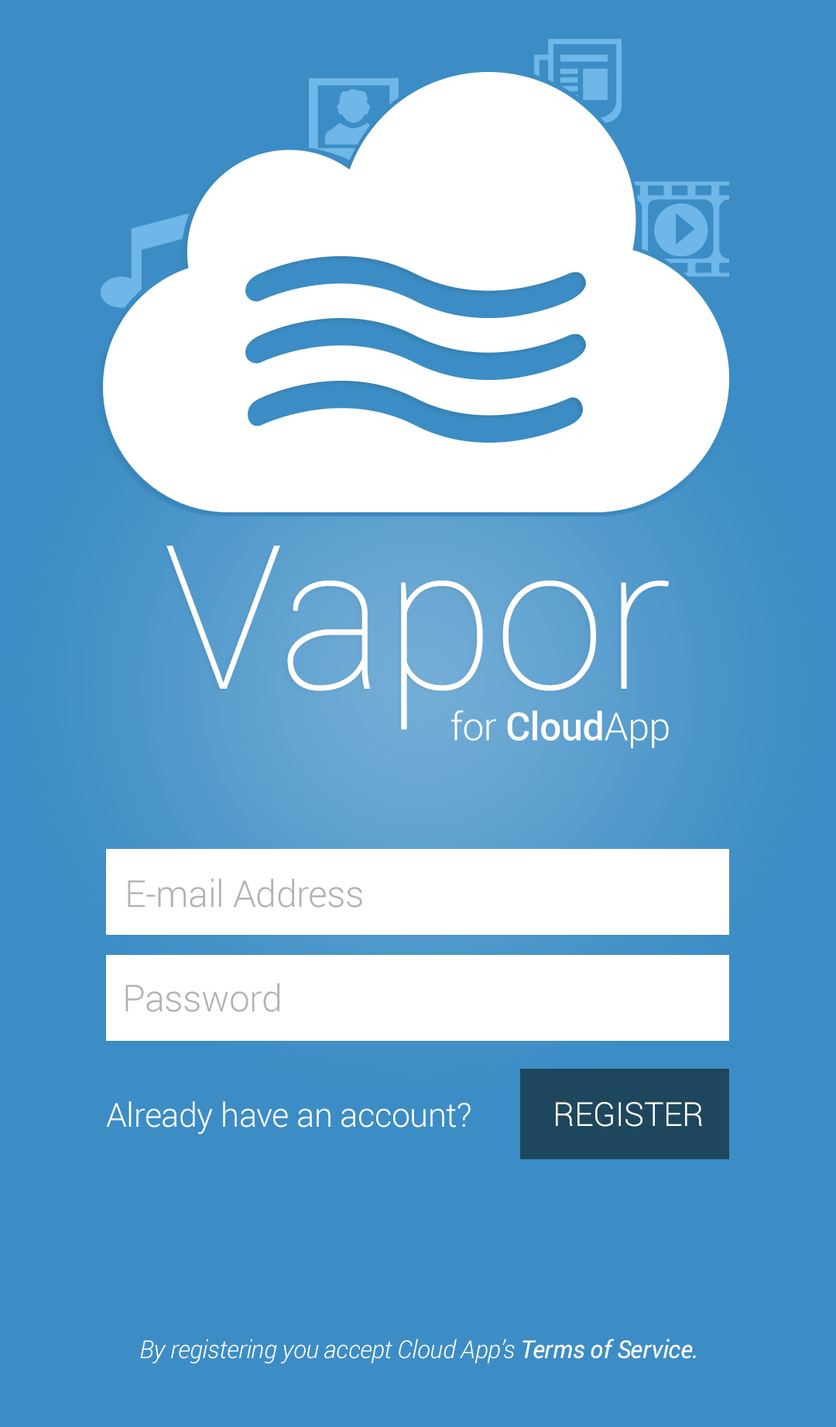
<style>
.page{position:relative;width:836px;height:1427px;background:#3c8dc5}
.page>*{position:absolute;margin:0}
.t1{font:200.6px "Roboto-Thin";color:#ffffff}
.t2{font:38.7px "Roboto-Medium";letter-spacing:-0.01em;color:#ffffff}
.t3{font:38.7px "Roboto-Light";letter-spacing:-0.01em;color:#ffffff}
.t4{font:37.1px "Roboto-Light";letter-spacing:-0.01em;color:#b2b2b2}
.t5{font:33.3px "Roboto-Light";letter-spacing:-0.01em;color:#ffffff}
.t6{font:24.8px "Roboto-LightItalic";letter-spacing:-0.01em;color:#ffffff}
.t7{font:24.8px "Roboto-Italic";letter-spacing:-0.01em;color:#ffffff}
</style>
<div class="page">
<p class="t1" style="left:166px;top:546px;width:503px;height:184px">Vapor</p>
<p class="t2" style="left:451px;top:710px;width:218px;height:38px"><span class="t3">for</span> Cloud<span class="t3">App</span></p>
<p class="t4" style="left:128px;top:878px;width:234px;height:30px">E-mail Address</p>
<p class="t4" style="left:125px;top:983px;width:154px;height:29px">Password</p>
<p class="t5" style="left:106px;top:1101px;width:364px;height:33px">Already have an account?</p>
<p class="t5" style="left:556px;top:1102px;width:146px;height:25px">REGISTER</p>
<p class="t6" style="left:140px;top:1339px;width:556px;height:24px">By registering you accept Cloud App’s <span class="t7">Terms of Service.</span></p>
</div>
